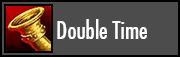
<style>
.page{position:relative;width:180px;height:57px;background:#4c4c4c}
.page>*{position:absolute;margin:0}
.t1{font:24px "FuturaCondensed";color:#ffffff}
</style>
<div class="page">
<p class="t1" style="left:57px;top:19px;width:90px;height:20px">Double Time</p>
</div>
